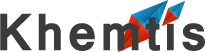
<style>
.page{position:relative;width:206px;height:52px;background:#ffffff}
.page>*{position:absolute;margin:0}
.t1{font:56.1px "Vrinda-Bold";letter-spacing:0.055em;color:#3b3b3b}
</style>
<div class="page">
<p class="t1" style="left:0px;top:13px;width:205px;height:38px">Khemtis</p>
</div>
